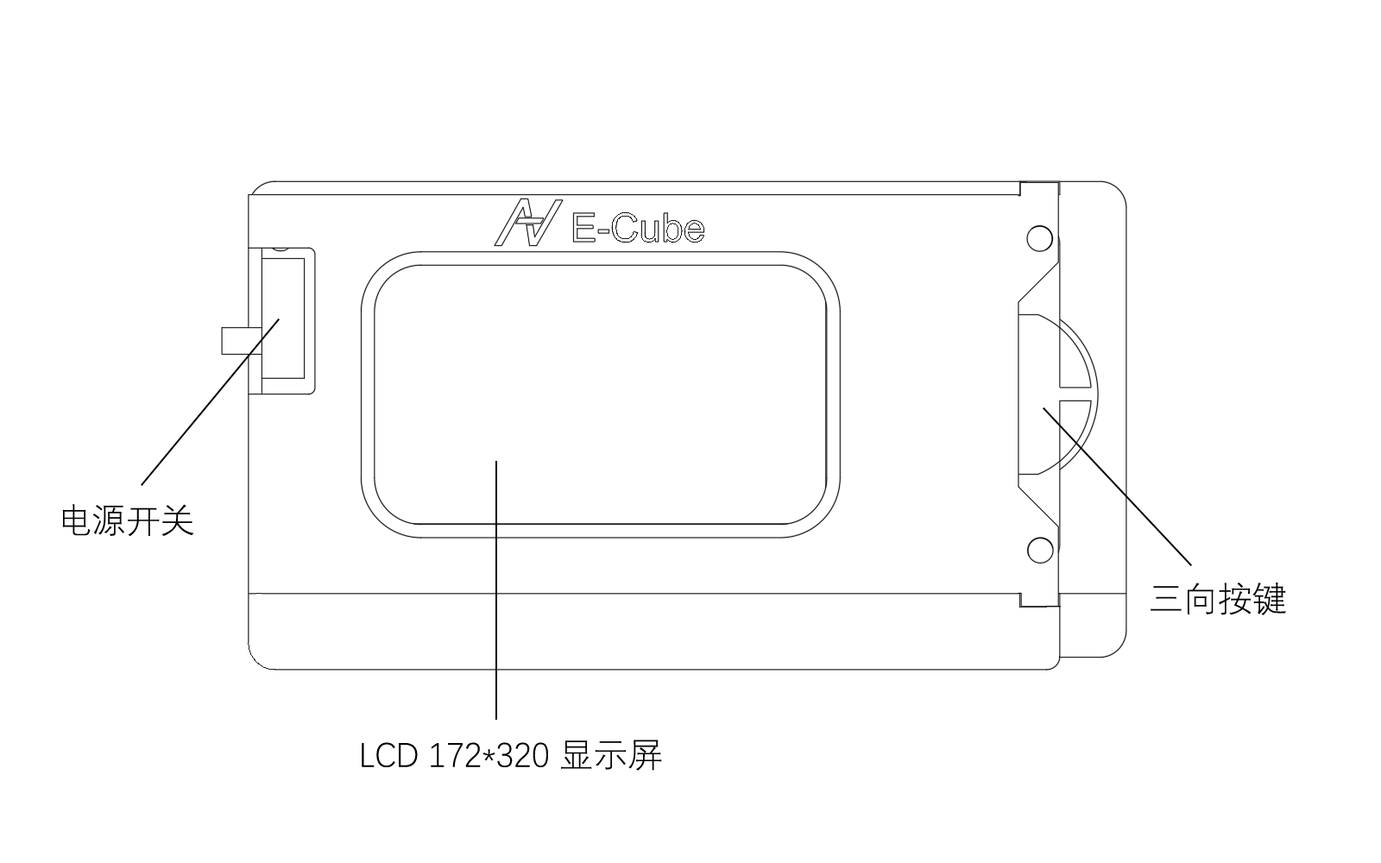
<style>
.page{position:relative;width:1381px;height:863px;background:#ffffff}
.page>*{position:absolute;margin:0}
.t1{font:34.5px "DengXian-Light";color:#000000}
</style>
<div class="page">
<p class="t1" style="left:62px;top:504px;width:132px;height:33px">电源开关</p>
<p class="t1" style="left:1151px;top:583px;width:135px;height:33px">三向按键</p>
<p class="t1" style="left:362px;top:740px;width:300px;height:31px">LCD 172*320 显示屏</p>
</div>
